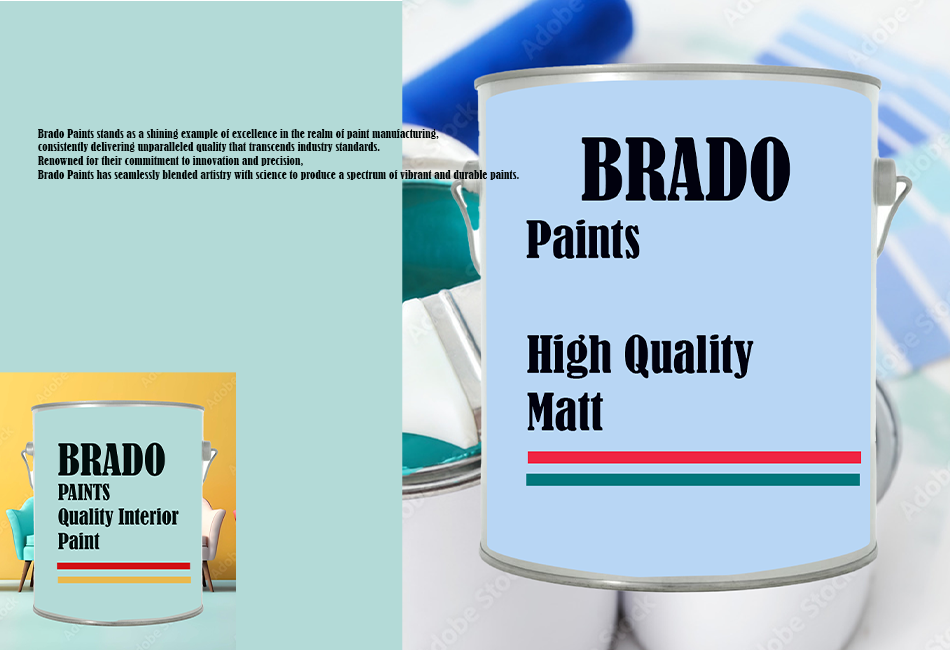
<style>
.page{position:relative;width:950px;height:650px;background:#b3dad7}
.page>*{position:absolute;margin:0}
.t1{font:11.3px "BernardMT-Condensed";color:#000505}
</style>
<div class="page">
<p class="t1" style="left:38px;top:129px;width:481px;height:51px">Brado Paints stands as a shining example of excellence in the realm of paint manufacturing, <br>consistently delivering unparalleled quality that transcends industry standards. <br>Renowned for their commitment to innovation and precision, <br>Brado Paints has seamlessly blended artistry with science to produce a spectrum of vibrant and durable paints.</p>
</div>
